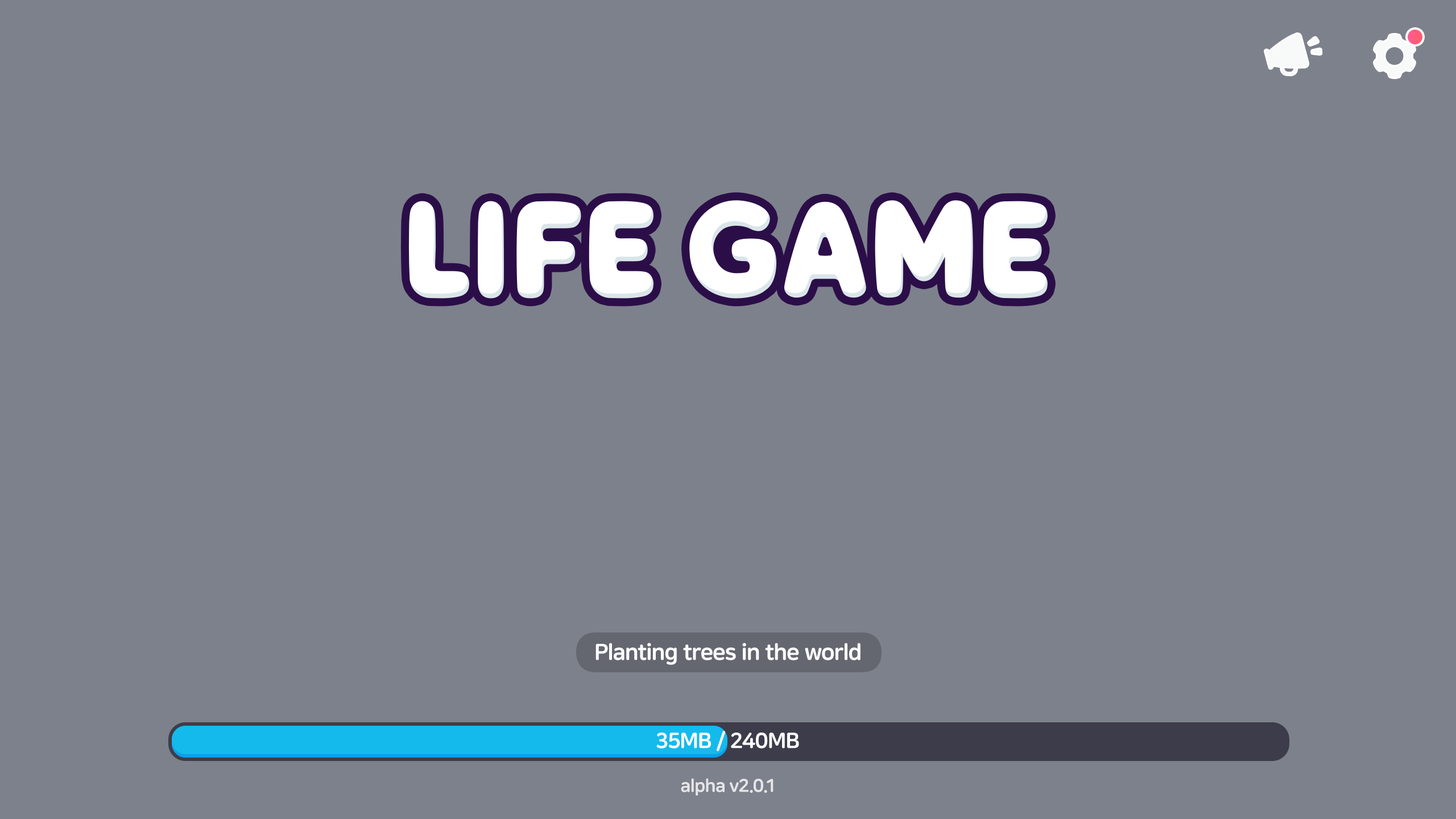
<style>
.page{position:relative;width:1456px;height:819px;background:#7d818c}
.page>*{position:absolute;margin:0}
.t1{font:22.7px "NanumSquareRoundEB";letter-spacing:-0.025em;color:#ffffff}
.t2{font:21.6px "NanumSquareRoundEB";letter-spacing:-0.025em;color:#ffffff}
.t3{font:18.2px "NanumSquareRoundEB";letter-spacing:-0.025em;color:#e5e6e8}
</style>
<div class="page">
<p class="t1" style="left:595px;top:643px;width:266px;height:22px">Planting trees in the world</p>
<p class="t2" style="left:656px;top:731px;width:143px;height:20px">35MB / 240MB</p>
<p class="t3" style="left:681px;top:778px;width:92px;height:18px">alpha v2.0.1</p>
</div>
